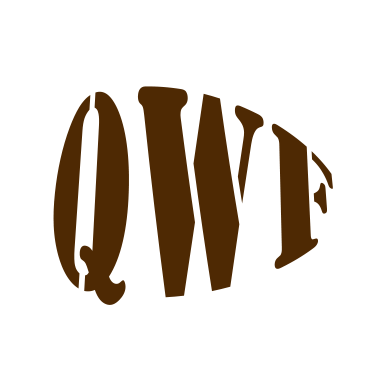
<style>
.page{position:relative;width:384px;height:384px;background:#ffffff}
.page>*{position:absolute;margin:0}
.t1{font:140px "Stencil";color:#4e2903}
</style>
<div class="page">
<p class="t1" style="left:53px;top:86px;width:280px;height:219px">QWF</p>
</div>
